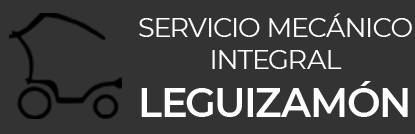
<style>
.page{position:relative;width:415px;height:134px;background:#333333}
.page>*{position:absolute;margin:0}
.t1{font:27px "Montserrat-Regular";letter-spacing:-0.025em;color:#ffffff}
.t2{font:40px "Montserrat-SemiBold";letter-spacing:-0.025em;color:#ffffff}
</style>
<div class="page">
<p class="t1" style="left:139px;top:13px;width:273px;height:56px;text-align:center">SERVICIO MECÁNICO<br>INTEGRAL</p>
<p class="t2" style="left:141px;top:81px;width:267px;height:36px">LEGUIZAMÓN</p>
</div>
